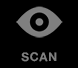
<style>
.page{position:relative;width:78px;height:68px;background:#000000}
.page>*{position:absolute;margin:0}
.t1{font:12.1px "AlteHaasGrotesk_Bold";letter-spacing:0.05em;color:#808080}
</style>
<div class="page">
<p class="t1" style="left:21px;top:52px;width:36px;height:10px">SCAN</p>
</div>
